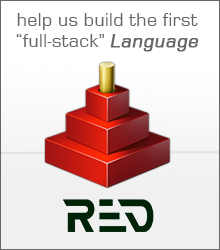
<style>
.page{position:relative;width:220px;height:250px;background:#ffffff}
.page>*{position:absolute;margin:0}
.t1{font:20px/21px "EurostileRegular";letter-spacing:0.02em;color:#666666}
.t2{font:20px/21px "EurostileRegular";letter-spacing:0.02em;color:#666666;font-weight:bold;font-style:italic}
</style>
<div class="page">
<p class="t1" style="left:16px;top:13px;width:183px;height:39px;text-align:center">help us build the first<br>“full-stack” <span class="t2">Language</span></p>
</div>
